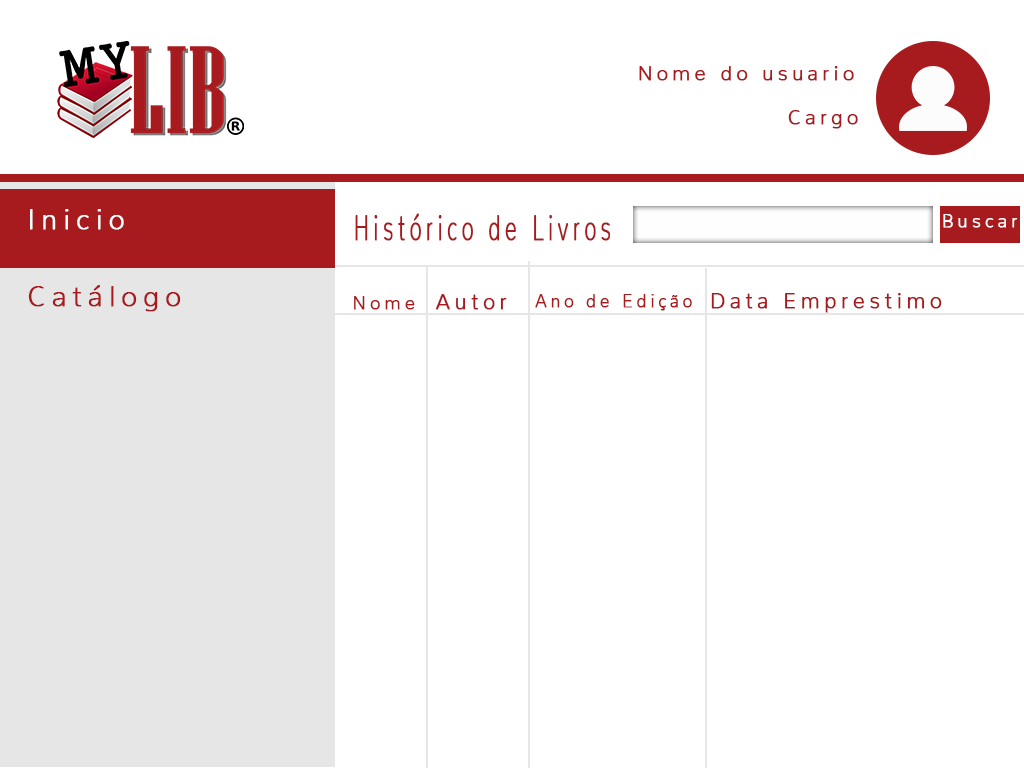
<style>
.page{position:relative;width:1024px;height:768px;background:#ffffff}
.page>*{position:absolute;margin:0}
.t1{font:20px "Nunito-ExtraLight";letter-spacing:0.2em;color:#a71b1e;font-weight:bold}
.t2{font:28px "Nunito-ExtraLight";letter-spacing:0.2em;color:#ffffff;font-weight:bold}
.t3{font:36.5px "Nunito-ExtraLight";letter-spacing:0.2em;color:#a71b1e;font-weight:bold;scale:0.57 1}
.t4{font:18.4px "Nunito-ExtraLight";letter-spacing:0.2em;color:#fbfafa;font-weight:bold}
.t5{font:28px "Nunito-ExtraLight";letter-spacing:0.2em;color:#a71b1e;font-weight:bold}
.t6{font:21.1px "Nunito-ExtraLight";letter-spacing:0.2em;color:#a71b1e;font-weight:bold}
.t7{font:17.2px "Nunito-ExtraLight";letter-spacing:0.2em;color:#a71b1e;font-weight:bold}
.t8{font:21px "Nunito-ExtraLight";letter-spacing:0.2em;color:#a71b1e;font-weight:bold}
.t9{font:18.4px "Nunito-ExtraLight";letter-spacing:0.2em;color:#a71b1e;font-weight:bold}
</style>
<div class="page">
<p class="t1" style="left:639px;top:66px;width:215px;height:15px">Nome do usuario</p>
<p class="t1" style="left:788px;top:110px;width:70px;height:19px">Cargo</p>
<p class="t2" style="left:30px;top:209px;width:94px;height:21px">Inicio</p>
<p class="t3" style="left:355px;top:213px;width:256px;height:28px">Histórico de Livros</p>
<p class="t4" style="left:943px;top:214px;width:75px;height:14px">Buscar</p>
<p class="t5" style="left:28px;top:285px;width:153px;height:27px">Catálogo</p>
<p class="t6" style="left:436px;top:294px;width:71px;height:16px">Autor</p>
<p class="t7" style="left:535px;top:294px;width:157px;height:17px">Ano de Edição</p>
<p class="t8" style="left:711px;top:293px;width:231px;height:20px">Data Emprestimo</p>
<p class="t9" style="left:354px;top:296px;width:61px;height:14px">Nome</p>
</div>
